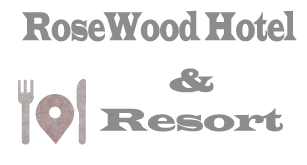
<style>
.page{position:relative;width:307px;height:165px;background:#ffffff}
.page>*{position:absolute;margin:0}
.t1{font:41.8px "LatinWide";letter-spacing:-0.025em;color:#8d8b8b;scale:0.48 1}
.t2{font:32.5px "LatinWide";letter-spacing:-0.025em;color:#8d8b8b}
</style>
<div class="page">
<p class="t1" style="left:22px;top:10px;width:275px;height:32px">RoseWood Hotel</p>
<p class="t2" style="left:99px;top:68px;width:184px;height:64px;text-align:center">&amp;<br>Resort</p>
</div>
